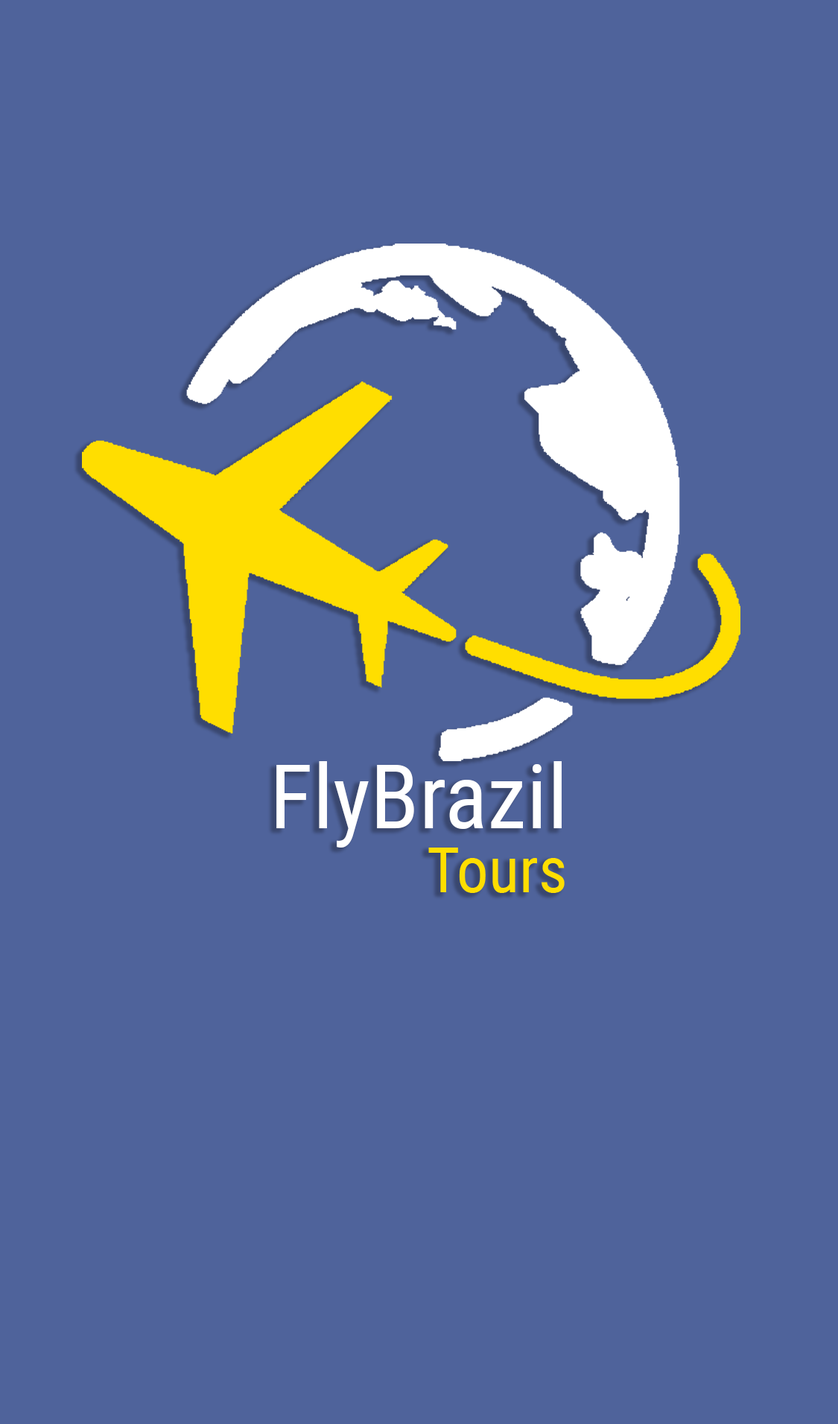
<style>
.page{position:relative;width:838px;height:1424px;background:#4f639b}
.page>*{position:absolute;margin:0}
.t1{font:89.3px "RobotoCondensed-Regular";color:#ffffff}
</style>
<div class="page">
<p class="t1" style="left:276px;top:761px;width:285px;height:86px">FlyBrazil</p>
</div>
